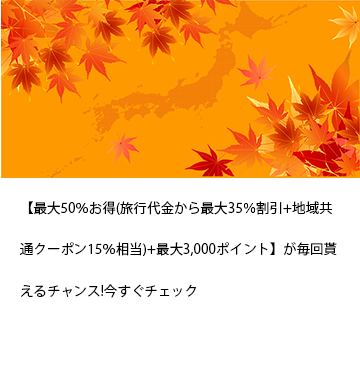
<style>
.page{position:relative;width:360px;height:370px;background:#ffffff}
.page>*{position:absolute;margin:0}
.t1{font:13.3px/41.7px "KozGoPr6N-Regular";letter-spacing:0.01em;color:#000000}
</style>
<div class="page">
<p class="t1" style="left:19px;top:201px;width:318px;height:97px">【最大50％お得(旅行代金から最大35％割引+地域共通クーポン15％相当)+最大3,000ポイント】が毎回貰えるチャンス!今すぐチェック</p>
</div>
